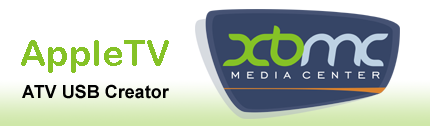
<style>
.page{position:relative;width:430px;height:126px;background:#ffffff}
.page>*{position:absolute;margin:0}
.t1{font:36px "ArialRoundedMTBold";color:#85c226}
.t2{font:18px "Arial-BoldMT";color:#000000}
</style>
<div class="page">
<p class="t1" style="left:21px;top:40px;width:148px;height:33px">AppleTV</p>
<p class="t2" style="left:22px;top:84px;width:147px;height:15px">ATV USB Creator</p>
</div>
